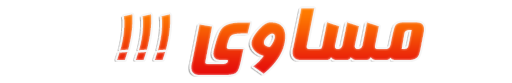
<style>
.page{position:relative;width:512px;height:83px;background:#ffffff}
.page>*{position:absolute;margin:0}
.t1{font:90px "BFarnaz"}
</style>
<div class="page">
<p class="t1" style="left:117px;top:8px;width:307px;height:67px">!!! مساوی</p>
</div>
